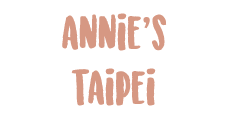
<style>
.page{position:relative;width:225px;height:120px;background:#ffffff}
.page>*{position:absolute;margin:0}
.t1{font:45.8px "SunriseInternationalDemo";color:#d69883}
.t2{font:45.8px "SukhumvitSet-Bold";color:#d69883}
</style>
<div class="page">
<p class="t1" style="left:62px;top:13px;width:105px;height:93px;text-align:center">annie<span class="t2">’</span>s<br>taipei</p>
</div>
